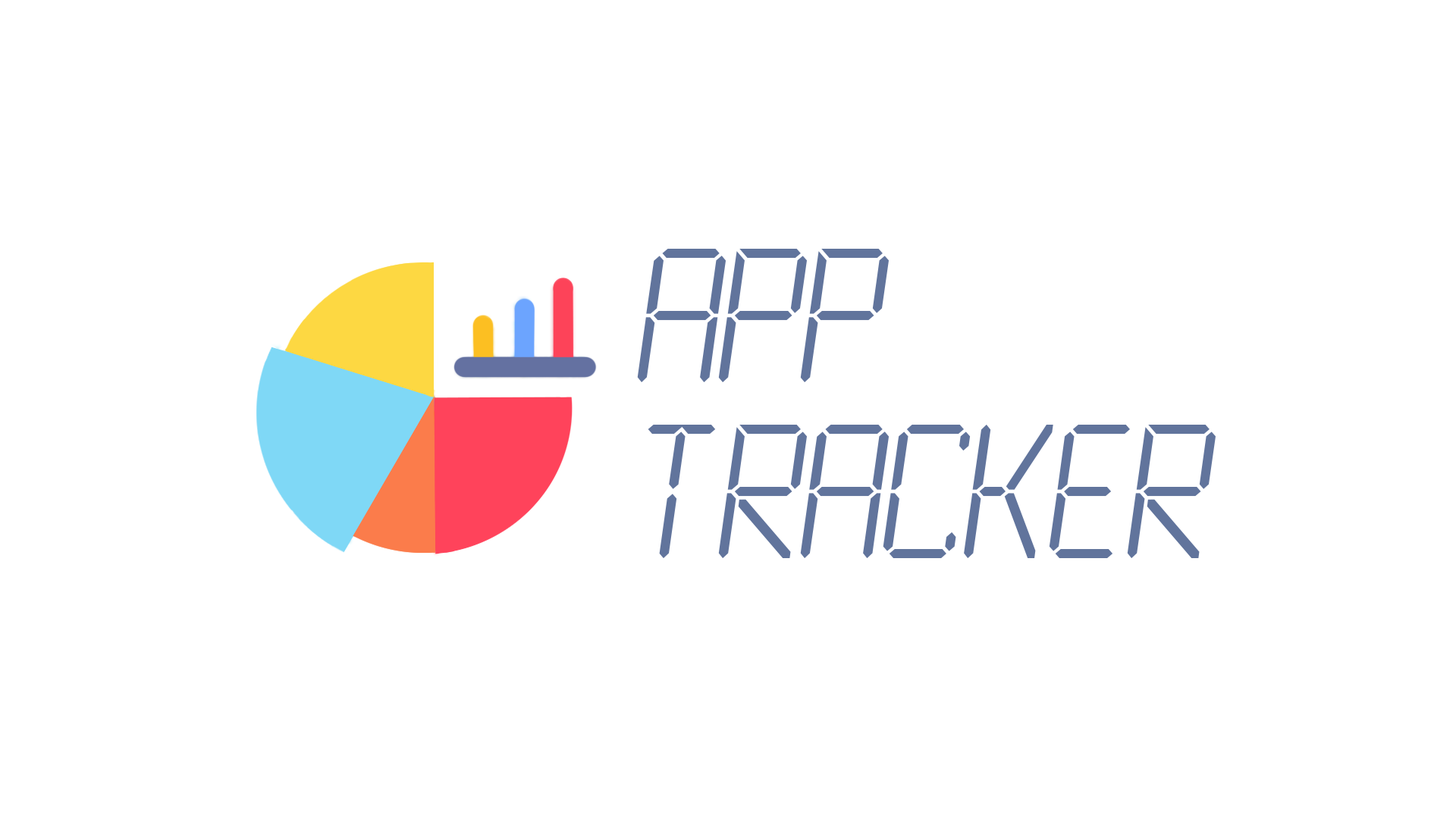
<style>
.page{position:relative;width:1456px;height:819px;background:#ffffff}
.page>*{position:absolute;margin:0}
.t1{font:166.8px/175.9px "LCDMono2Light";color:#61749c}
</style>
<div class="page">
<p class="t1" style="left:637px;top:249px;width:579px;height:309px">APP<br>TRACKER</p>
</div>
